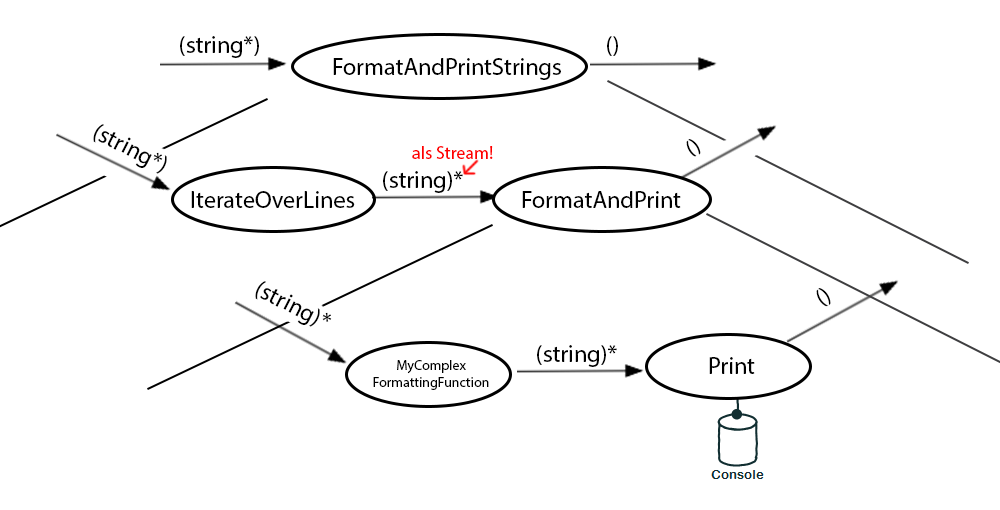
<style>
.page{position:relative;width:1000px;height:510px;background:#ffffff}
.page>*{position:absolute;margin:0}
.t1{font:24px "MyriadPro-Regular";color:#000000}
.t2{font:18px "MyriadPro-Regular";color:#ff0000}
.t3{font:14px "MyriadPro-Regular";color:#000000}
</style>
<div class="page">
<p class="t1" style="left:180px;top:36px;width:79px;height:22px">(string*)</p>
<p class="t1" style="left:607px;top:36px;width:11px;height:20px">()</p>
<p class="t1" style="left:333px;top:58px;width:228px;height:22px">FormatAndPrintStrings</p>
<p class="t1" style="left:93px;top:124px;width:74px;height:50px;rotate:27deg">(string*)</p>
<p class="t2" style="left:412px;top:146px;width:81px;height:13px">als Stream!</p>
<p class="t1" style="left:686px;top:139px;width:15px;height:19px;rotate:-34deg">()</p>
<p class="t1" style="left:383px;top:171px;width:80px;height:22px">(string)*</p>
<p class="t1" style="left:191px;top:191px;width:164px;height:17px">IterateOverLines</p>
<p class="t1" style="left:522px;top:191px;width:159px;height:17px">FormatAndPrint</p>
<p class="t1" style="left:255px;top:281px;width:77px;height:46px;rotate:27deg">(string)*</p>
<p class="t1" style="left:816px;top:288px;width:15px;height:19px;rotate:-34deg">()</p>
<p class="t1" style="left:537px;top:345px;width:80px;height:22px">(string)*</p>
<p class="t3" style="left:373px;top:360px;width:116px;height:30px;text-align:center">MyComplex<br>FormattingFunction</p>
<p class="t1" style="left:709px;top:357px;width:46px;height:17px">Print</p>
</div>
